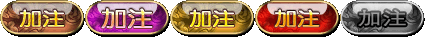
<style>
.page{position:relative;width:425px;height:37px}
.page>*{position:absolute;margin:0}
.t1{font:17.6px "STXihei";color:#868585;font-weight:bold;scale:1.38 1}
</style>
<div class="page">
<p class="t1" style="left:358px;top:9px;width:48px;height:17px">加注</p>
</div>
